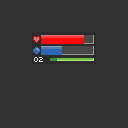
<style>
.page{position:relative;width:128px;height:128px;background:#333333}
.page>*{position:absolute;margin:0}
.t1{font:8px "PFArmaFive";color:#dcdcdc}
</style>
<div class="page">
<p class="t1" style="left:34px;top:57px;width:9px;height:5px">02</p>
</div>
